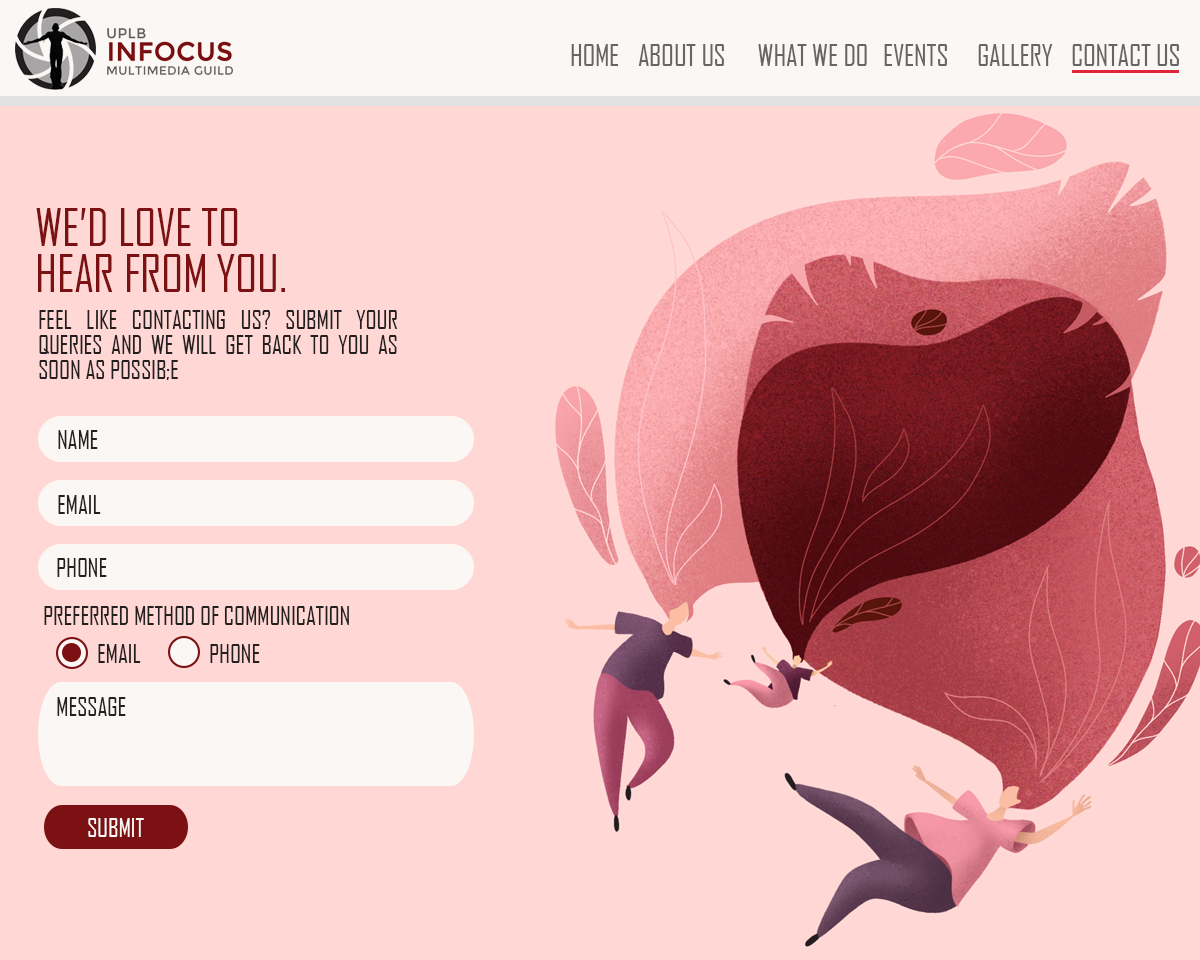
<style>
.page{position:relative;width:1200px;height:960px;background:#ffd8d5}
.page>*{position:absolute;margin:0}
.t1{font:29.3px "AgencyFB-Reg";letter-spacing:-0.01em;color:#676465;text-transform:uppercase}
.t2{font:12px/45.8px "AgencyFB-Reg";letter-spacing:-0.01em;color:#7b1113;text-transform:uppercase}
.t3{font:25px/25px "AgencyFB-Reg";letter-spacing:-0.01em;color:#231f20;text-transform:uppercase}
.t4{font:25px "AgencyFB-Reg";letter-spacing:-0.01em;color:#232020;text-transform:uppercase}
.t5{font:25px "AgencyFB-Reg";letter-spacing:-0.01em;color:#fbf7f5;text-transform:uppercase}
</style>
<div class="page">
<p class="t1" style="left:571px;top:44px;width:608px;height:22px">home   about us  what we do  events gallery contact us</p>
<p class="t2" style="left:36px;top:208px;width:249px;height:84px">We’d love to<br>hear from you.</p>
<p class="t3" style="left:39px;top:310px;width:358px;height:70px;text-align:justify">Feel like contacting us? submit your queries and we will get back to you as soon as possib;e</p>
<p class="t4" style="left:58px;top:430px;width:40px;height:19px">name</p>
<p class="t4" style="left:58px;top:495px;width:43px;height:19px">email</p>
<p class="t4" style="left:57px;top:558px;width:50px;height:19px">phone</p>
<p class="t4" style="left:44px;top:606px;width:305px;height:19px">preferred method of communication</p>
<p class="t4" style="left:98px;top:644px;width:43px;height:19px">email</p>
<p class="t4" style="left:210px;top:644px;width:50px;height:19px">phone</p>
<p class="t4" style="left:57px;top:697px;width:69px;height:19px">message</p>
<p class="t5" style="left:88px;top:818px;width:56px;height:19px">submit</p>
</div>
